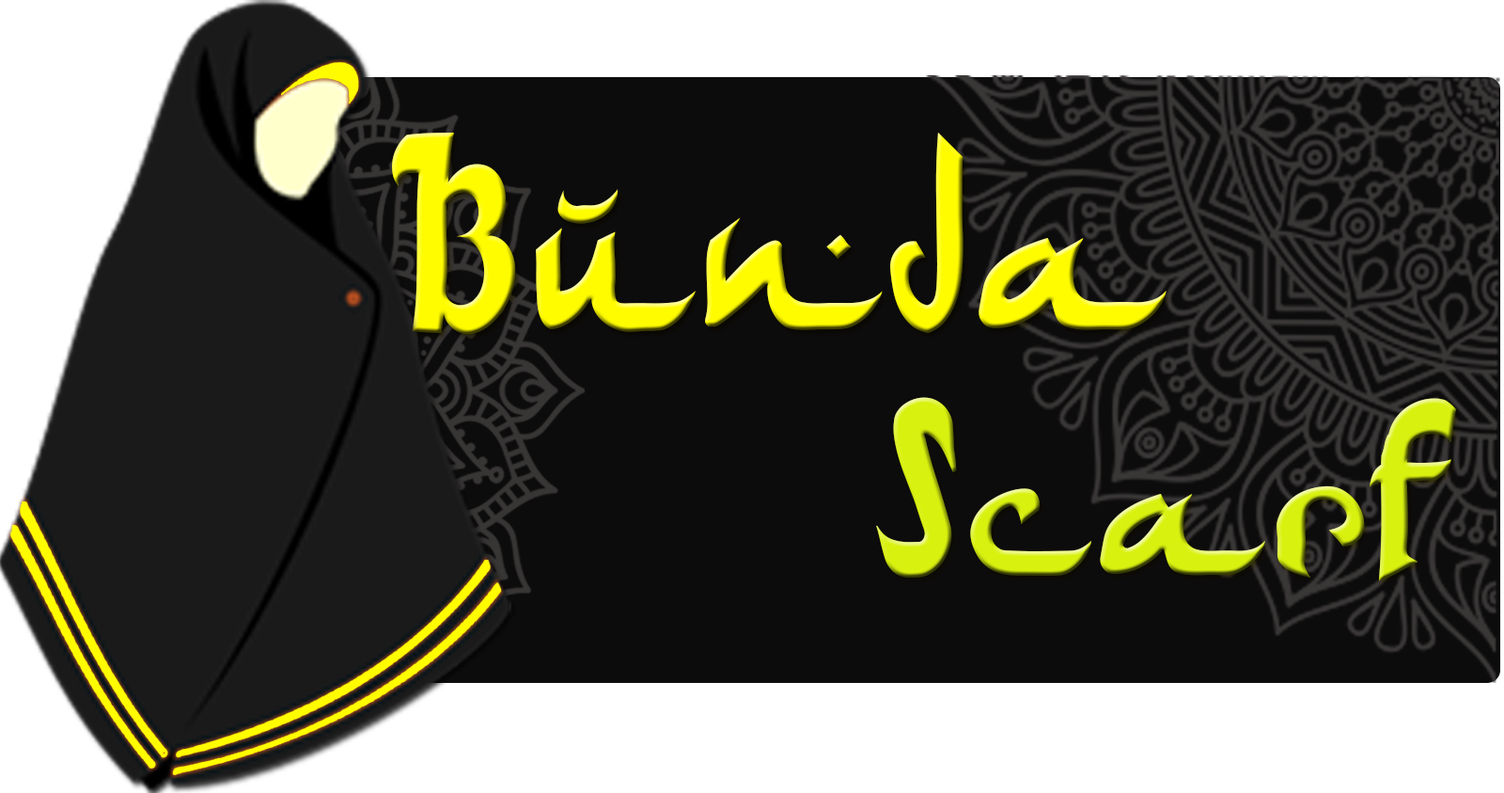
<style>
.page{position:relative;width:1504px;height:793px;background:#0d0c0c}
.page>*{position:absolute;margin:0}
.t1{font:281.8px "ArabDancesMediumItalic"}
.t2{font:250px "ArabDancesMediumItalic"}
</style>
<div class="page">
<p class="t1" style="left:392px;top:133px;width:775px;height:202px">Bunda</p>
<p class="t2" style="left:876px;top:397px;width:580px;height:184px">Scarf</p>
</div>
